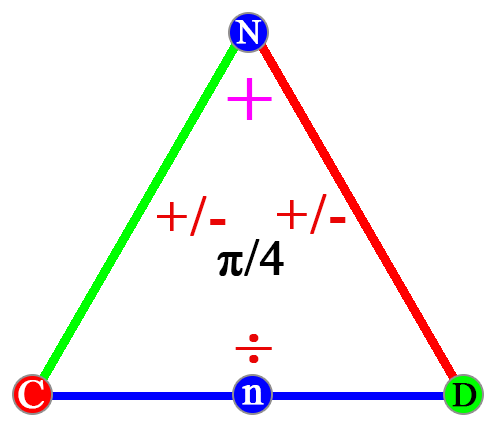
<style>
.page{position:relative;width:499px;height:424px;background:#ffffff}
.page>*{position:absolute;margin:0}
.t1{font:33.9px "TimesNewRomanPSMT";color:#ffffff;font-weight:bold}
.t2{font:79.6px "TimesNewRomanPSMT";color:#ff00ff;font-weight:bold}
.t3{font:54.2px "TimesNewRomanPSMT";letter-spacing:0.04em;color:#e90505;font-weight:bold}
.t4{font:50px "TimesNewRomanPSMT";color:#000000;font-weight:bold}
.t5{font:80.4px "BaskOldFace";letter-spacing:0.04em;color:#e90505;font-weight:bold}
.t6{font:41.3px "TimesNewRomanPSMT";color:#ffffff;font-weight:bold}
.t7{font:34.2px "TimesNewRomanPSMT";color:#000000;font-weight:bold}
</style>
<div class="page">
<p class="t1" style="left:235px;top:20px;width:27px;height:24px">N</p>
<p class="t2" style="left:227px;top:78px;width:45px;height:42px">+</p>
<p class="t3" style="left:157px;top:196px;width:69px;height:40px">+/-</p>
<p class="t3" style="left:277px;top:194px;width:69px;height:40px">+/-</p>
<p class="t4" style="left:217px;top:239px;width:67px;height:37px">π/4</p>
<p class="t5" style="left:235px;top:334px;width:37px;height:29px">÷</p>
<p class="t6" style="left:18px;top:380px;width:26px;height:29px">C</p>
<p class="t6" style="left:242px;top:385px;width:22px;height:20px">n</p>
<p class="t7" style="left:452px;top:383px;width:25px;height:24px">D</p>
</div>
